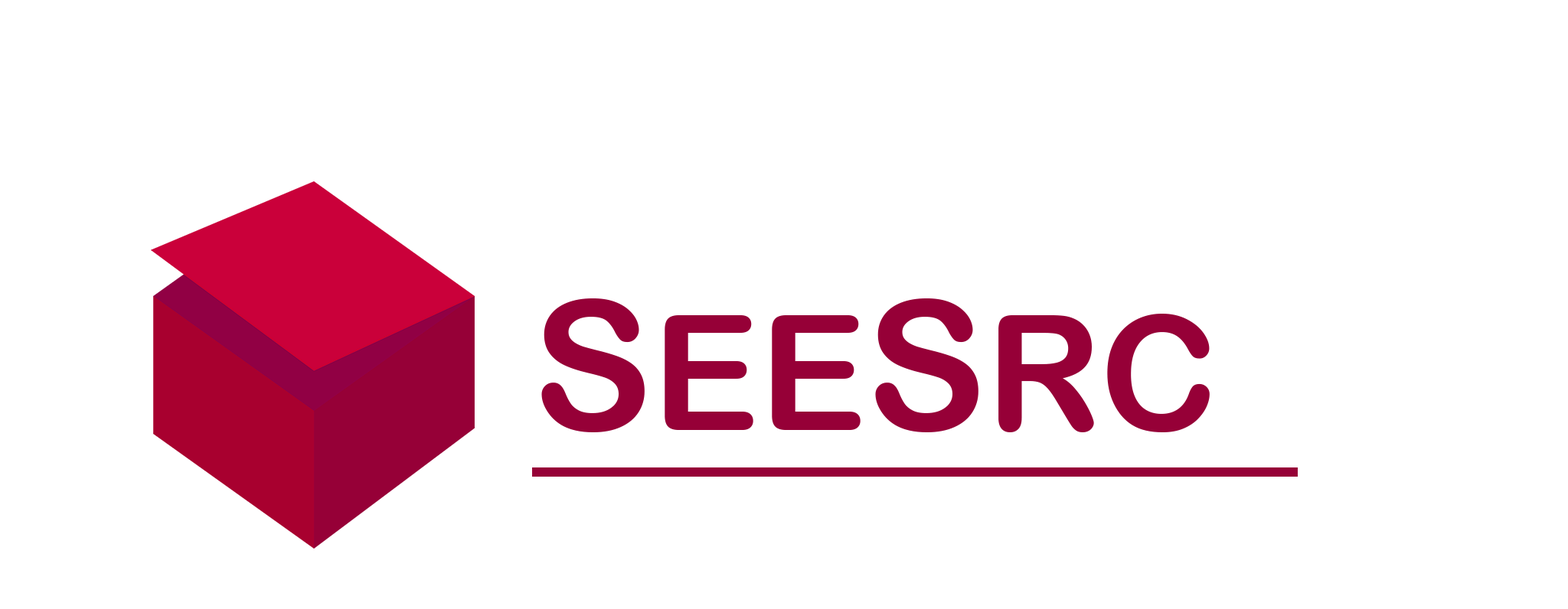
<style>
.page{position:relative;width:1568px;height:609px;background:#ffffff}
.page>*{position:absolute;margin:0}
.t1{font:159.8px "ArialRoundedMTBold";color:#960037}
.t2{font:181.1px "ArialRoundedMTBold";color:#960037}
</style>
<div class="page">
<p class="t1" style="left:541px;top:299px;width:669px;height:134px"><span class="t2">S</span>EE<span class="t2">S</span>RC</p>
</div>
